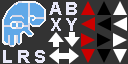
<style>
.page{position:relative;width:128px;height:64px;background:#333333}
.page>*{position:absolute;margin:0}
.t1{font:18px "Arial-BoldMT";color:#e8e8f8}
</style>
<div class="page">
<p class="t1" style="left:49px;top:2px;width:13px;height:13px">A</p>
<p class="t1" style="left:66px;top:2px;width:11px;height:13px">B</p>
<p class="t1" style="left:51px;top:18px;width:10px;height:13px">X</p>
<p class="t1" style="left:66px;top:18px;width:11px;height:13px">Y</p>
<p class="t1" style="left:3px;top:50px;width:9px;height:13px">L</p>
<p class="t1" style="left:18px;top:50px;width:12px;height:13px">R</p>
<p class="t1" style="left:35px;top:50px;width:10px;height:13px">S</p>
</div>
